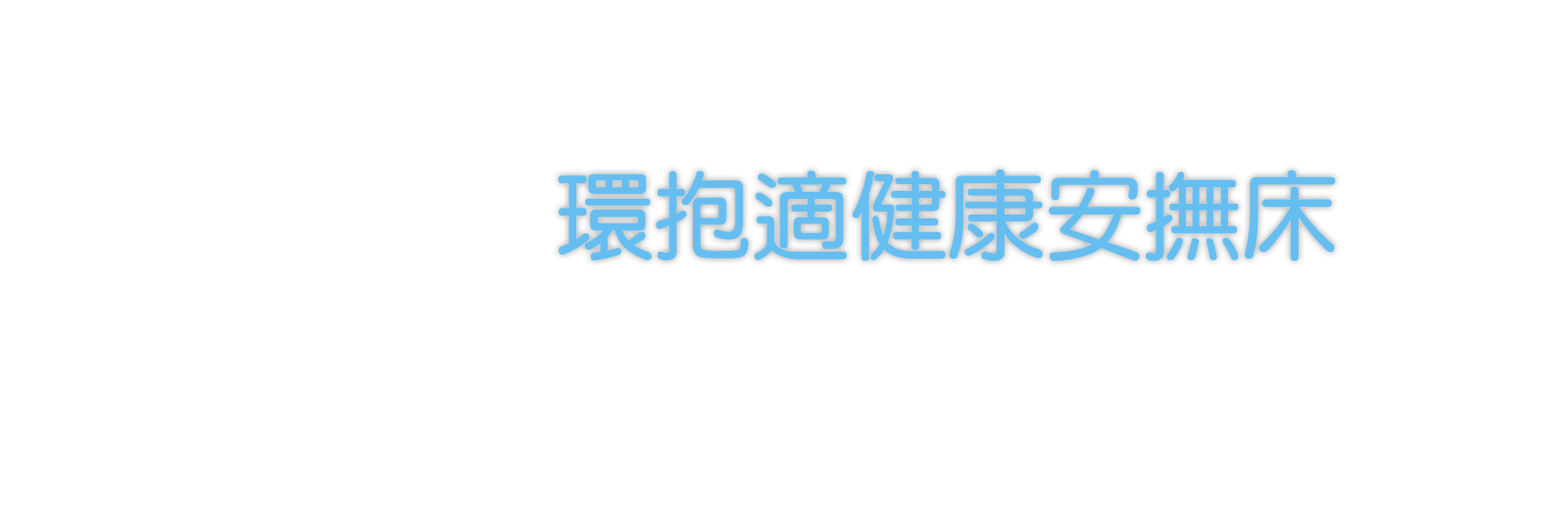
<style>
.page{position:relative;width:1568px;height:525px;background:#ffffff}
.page>*{position:absolute;margin:0}
.t1{font:98px "DFYuan-W7-WIN-BF";color:#66bef0}
</style>
<div class="page">
<p class="t1" style="left:558px;top:170px;width:778px;height:92px">環抱適健康安撫床</p>
</div>
